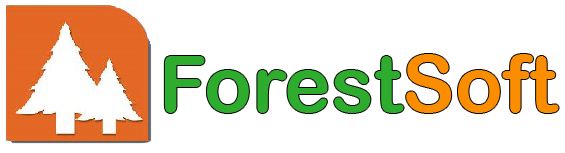
<style>
.page{position:relative;width:565px;height:153px;background:#ffffff}
.page>*{position:absolute;margin:0}
.t1{font:79.2px "ArialRoundedMTBold";color:#2eac2e}
.t2{font:79.2px "ArialRoundedMTBold";color:#fb8e00}
</style>
<div class="page">
<p class="t1" style="left:164px;top:54px;width:395px;height:59px">Forest<span class="t2">Soft</span></p>
</div>
